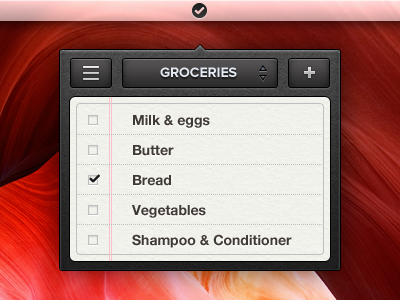
<style>
.page{position:relative;width:400px;height:300px}
.page>*{position:absolute;margin:0}
.t1{font:14px "ProximaNova-Bold";color:#e3eaf3;text-transform:uppercase}
.t2{font:14px "HelveticaNeue-Bold";color:#403a35}
</style>
<div class="page">
<p class="t1" style="left:160px;top:67px;width:77px;height:10px">groceries</p>
<p class="t2" style="left:133px;top:115px;width:77px;height:13px">Milk &amp; eggs</p>
<p class="t2" style="left:133px;top:145px;width:41px;height:11px">Butter</p>
<p class="t2" style="left:133px;top:175px;width:38px;height:11px">Bread</p>
<p class="t2" style="left:132px;top:205px;width:74px;height:13px">Vegetables</p>
<p class="t2" style="left:132px;top:234px;width:160px;height:14px">Shampoo &amp; Conditioner</p>
</div>
